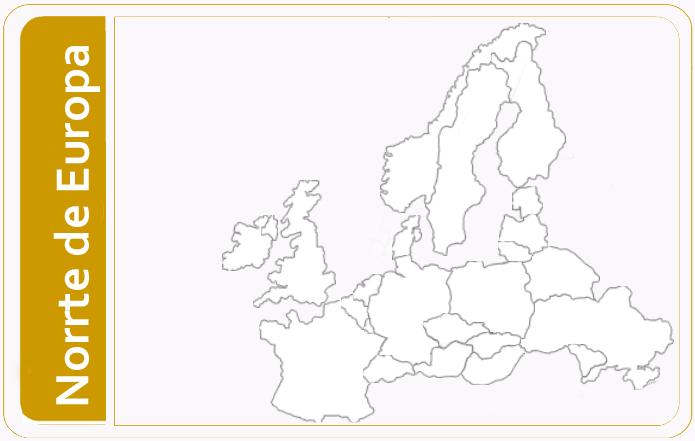
<style>
.page{position:relative;width:695px;height:441px;background:#fbf8fb}
.page>*{position:absolute;margin:0}
.t1{font:49px "Corbel-Bold";color:#ffffff}
</style>
<div class="page">
<p class="t1" style="left:53px;top:46px;width:47px;height:359px;rotate:-90deg">Norrte de Europa</p>
</div>
